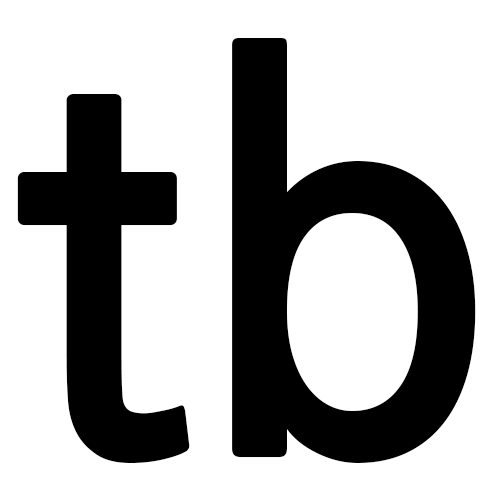
<style>
.page{position:relative;width:500px;height:500px;background:#ffffff}
.page>*{position:absolute;margin:0}
.t1{font:512.5px "NanumGothicBold";color:#000000}
</style>
<div class="page">
<p class="t1" style="left:17px;top:38px;width:459px;height:425px">tb</p>
</div>
